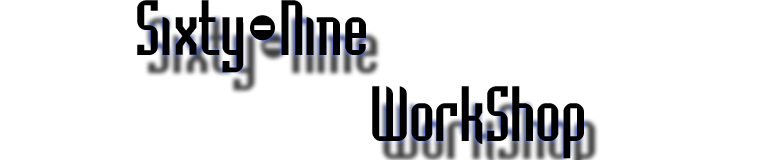
<style>
.page{position:relative;width:760px;height:160px;background:#ffffff}
.page>*{position:absolute;margin:0}
.t1{font:72px "BedrockPlain";color:#000000}
</style>
<div class="page">
<p class="t1" style="left:137px;top:0px;width:447px;height:159px">Sixty-Nine<br>        WorkShop</p>
</div>
